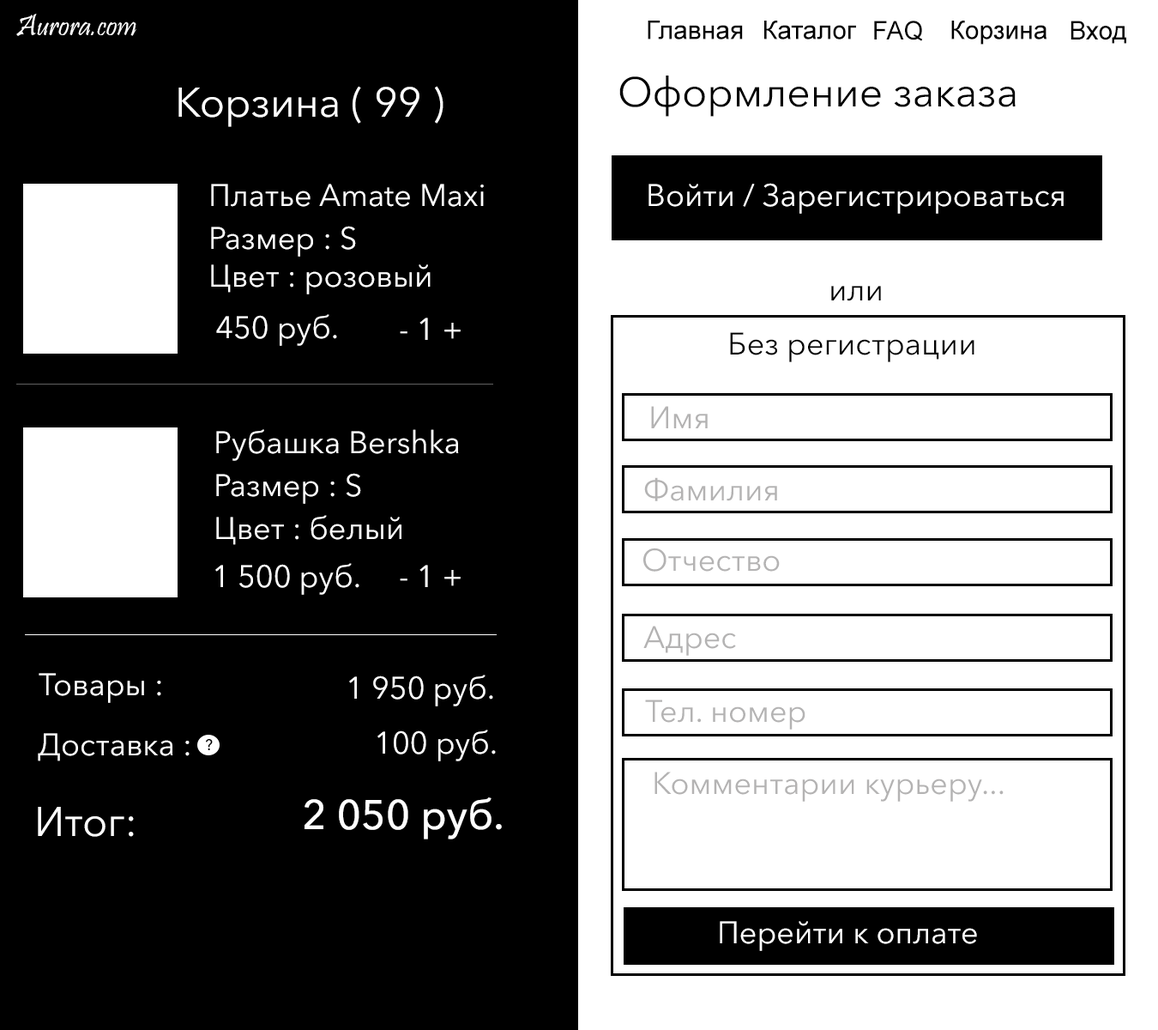
<style>
.page{position:relative;width:1158px;height:1030px;background:#000000}
.page>*{position:absolute;margin:0}
.t1{font:30.9px "Pristina-Regular";color:#fefefe}
.t2{font:25.7px "ArialMT";color:#000000}
.t3{font:41.2px "AvenirNextCyr-Regular";color:#000000}
.t4{font:41.2px "AvenirNextCyr-Regular";color:#ffffff}
.t5{font:30.9px "AvenirNextCyr-Regular";color:#ffffff}
.t6{font:30.9px "AvenirNextCyr-Regular";color:#000000}
.t7{font:30.9px "AvenirNextCyr-Regular";color:#b4b3b3}
.t8{font:15.4px "AvenirNextCyr-Medium";color:#000000}
.t9{font:41.2px "AvenirNextCyr-Medium";color:#ffffff}
</style>
<div class="page">
<p class="t1" style="left:16px;top:14px;width:120px;height:22px">Aurora.com</p>
<p class="t2" style="left:648px;top:21px;width:95px;height:18px">Главная</p>
<p class="t2" style="left:764px;top:21px;width:92px;height:18px">Каталог</p>
<p class="t2" style="left:874px;top:21px;width:49px;height:20px">FAQ</p>
<p class="t2" style="left:951px;top:21px;width:97px;height:24px">Корзина</p>
<p class="t2" style="left:1071px;top:21px;width:55px;height:23px">Вход</p>
<p class="t3" style="left:619px;top:75px;width:397px;height:42px">Оформление заказа</p>
<p class="t4" style="left:178px;top:86px;width:266px;height:41px">Корзина ( 99 )</p>
<p class="t5" style="left:211px;top:184px;width:273px;height:23px">Платье Amate Maxi</p>
<p class="t5" style="left:649px;top:183px;width:415px;height:31px">Войти / Зарегистрироваться</p>
<p class="t5" style="left:211px;top:226px;width:145px;height:31px">Размер : S</p>
<p class="t5" style="left:211px;top:264px;width:220px;height:30px">Цвет : розовый</p>
<p class="t6" style="left:831px;top:286px;width:50px;height:15px">или</p>
<p class="t5" style="left:216px;top:314px;width:121px;height:32px">450 руб.</p>
<p class="t5" style="left:400px;top:317px;width:61px;height:23px">- 1 +</p>
<p class="t6" style="left:730px;top:332px;width:245px;height:30px">Без регистрации</p>
<p class="t7" style="left:651px;top:406px;width:57px;height:22px">Имя</p>
<p class="t5" style="left:216px;top:429px;width:243px;height:32px">Рубашка Bershka</p>
<p class="t5" style="left:216px;top:473px;width:145px;height:31px">Размер : S</p>
<p class="t7" style="left:644px;top:477px;width:133px;height:24px">Фамилия</p>
<p class="t5" style="left:216px;top:515px;width:186px;height:30px">Цвет : белый</p>
<p class="t7" style="left:643px;top:547px;width:137px;height:24px">Отчество</p>
<p class="t5" style="left:215px;top:563px;width:144px;height:32px">1 500 руб.</p>
<p class="t5" style="left:400px;top:565px;width:61px;height:22px">- 1 +</p>
<p class="t7" style="left:643px;top:625px;width:93px;height:30px">Адрес</p>
<p class="t5" style="left:39px;top:673px;width:122px;height:30px">Товары :</p>
<p class="t5" style="left:349px;top:674px;width:144px;height:32px">1 950 руб.</p>
<p class="t7" style="left:645px;top:699px;width:161px;height:30px">Тел. номер</p>
<p class="t5" style="left:38px;top:733px;width:152px;height:28px">Доставка :</p>
<p class="t5" style="left:377px;top:729px;width:119px;height:32px">100 руб.</p>
<p class="t8" style="left:206px;top:739px;width:7px;height:11px">?</p>
<p class="t7" style="left:655px;top:771px;width:349px;height:30px">Комментарии курьеру...</p>
<p class="t9" style="left:305px;top:797px;width:197px;height:42px">2 050 руб.</p>
<p class="t4" style="left:38px;top:806px;width:96px;height:30px">Итог:</p>
<p class="t5" style="left:720px;top:921px;width:257px;height:30px">Перейти к оплате</p>
</div>
